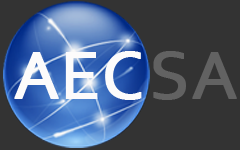
<style>
.page{position:relative;width:240px;height:150px;background:#333333}
.page>*{position:absolute;margin:0}
.t1{font:71.5px "Corbel";color:#fcfbfb;font-weight:bold}
.t2{font:71.5px "Corbel";color:#626262;font-weight:bold}
</style>
<div class="page">
<p class="t1" style="left:14px;top:51px;width:128px;height:49px">AEC</p>
<p class="t2" style="left:153px;top:51px;width:84px;height:49px">SA</p>
</div>
